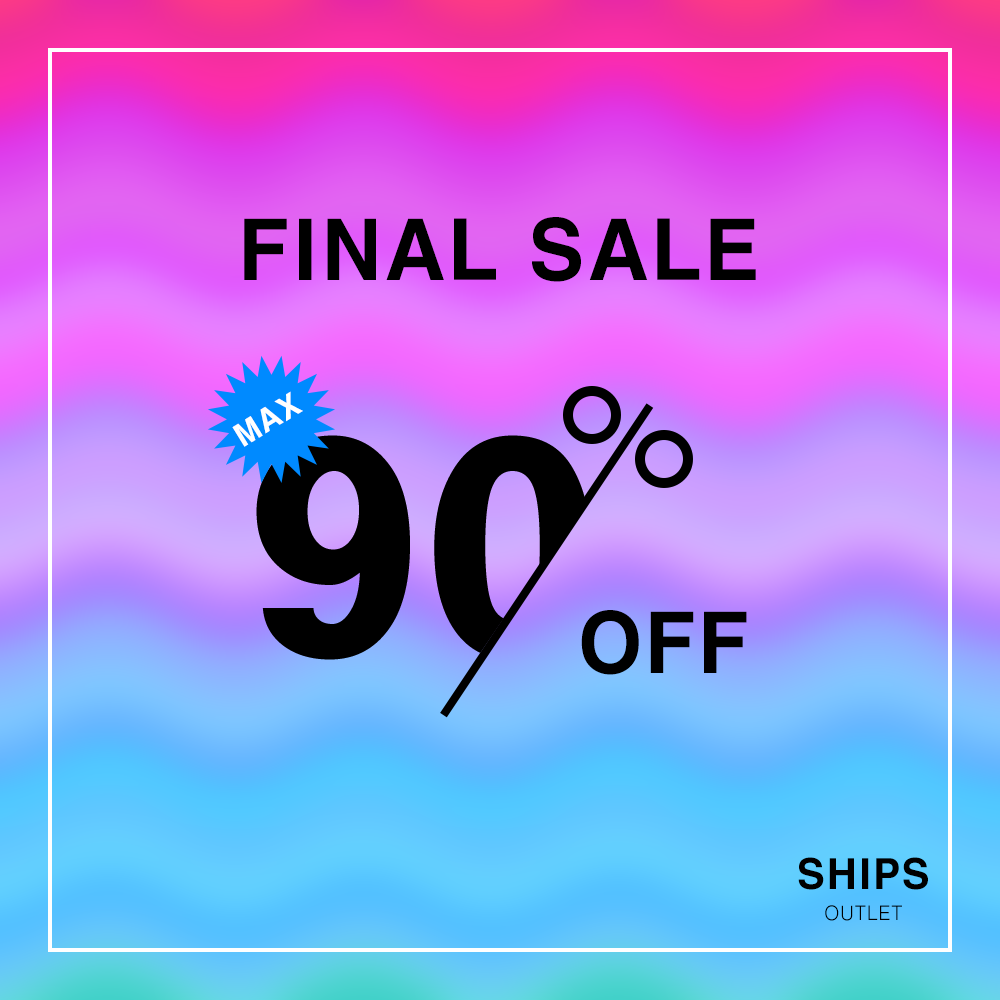
<style>
.page{position:relative;width:1000px;height:1000px}
.page>*{position:absolute;margin:0}
.t1{font:80px "H2gtrE";color:#000000;text-transform:uppercase}
.t2{font:30px "H2gtrE";color:#ffffff;text-transform:uppercase}
.t3{font:40px "H2gtrE";color:#000000;text-transform:uppercase}
.t4{font:20px "H2gtrM";color:#000000;text-transform:uppercase}
</style>
<div class="page">
<p class="t1" style="left:244px;top:217px;width:512px;height:65px">FINAL SALE</p>
<p class="t2" style="left:232px;top:391px;width:71px;height:56px;rotate:-32deg">MAX</p>
<p class="t1" style="left:581px;top:610px;width:166px;height:65px">OFF</p>
<p class="t3" style="left:798px;top:857px;width:130px;height:33px">SHIPS</p>
<p class="t4" style="left:825px;top:905px;width:77px;height:16px">OUTLET</p>
</div>
